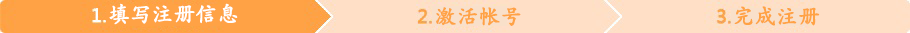
<style>
.page{position:relative;width:910px;height:33px;background:#ffdfc6}
.page>*{position:absolute;margin:0}
.t1{font:21.3px "STKaiti";color:#ffffff;font-weight:bold}
.t2{font:21.3px "STKaiti";color:#ffa245;font-weight:bold}
</style>
<div class="page">
<p class="t1" style="left:109px;top:3px;width:129px;height:22px">填写注册信息</p>
<p class="t2" style="left:734px;top:6px;width:86px;height:20px">完成注册</p>
<p class="t2" style="left:436px;top:7px;width:85px;height:19px">激活帐号</p>
</div>
